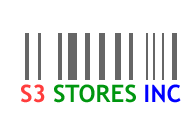
<style>
.page{position:relative;width:184px;height:127px;background:#ffffff}
.page>*{position:absolute;margin:0}
.t1{font:24px "TrebuchetMS-Bold";color:#00960f}
.t2{font:24px "TrebuchetMS-Bold";color:#ff3d3d}
.t3{font:24px "TrebuchetMS-Bold";color:#0000ff}
</style>
<div class="page">
<p class="t1" style="left:21px;top:84px;width:160px;height:19px"><span class="t2">S3 </span>STORES <span class="t3">INC</span></p>
</div>
